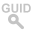
<style>
.page{position:relative;width:32px;height:32px;background:#ffffff}
.page>*{position:absolute;margin:0}
.t1{font:12px "Arial-BoldMT";color:#c4c4c4}
</style>
<div class="page">
<p class="t1" style="left:1px;top:3px;width:30px;height:10px">GUID</p>
</div>
